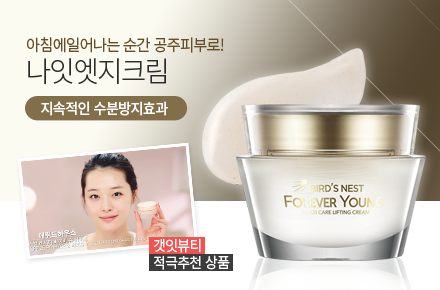
<style>
.page{position:relative;width:440px;height:290px}
.page>*{position:absolute;margin:0}
.t1{font:16.2px "NotoSansCJKkr-DemiLight";letter-spacing:-0.05em;color:#694f27;scale:0.95 1}
.t2{font:28.8px "NotoSansCJKkr-Light";letter-spacing:-0.05em;color:#2c2c2c;scale:0.95 1}
.t3{font:15px "NotoSansCJKkr-Medium";letter-spacing:-0.05em;color:#ffffff;scale:0.95 1}
.t4{font:14.7px "NotoSansCJKkr-Regular";letter-spacing:-0.05em;color:#ffffff;scale:0.95 1}
</style>
<div class="page">
<p class="t1" style="left:27px;top:37px;width:197px;height:16px">아침에일어나는 순간 공주피부로!</p>
<p class="t2" style="left:28px;top:58px;width:138px;height:27px">나잇엣지크림</p>
<p class="t3" style="left:41px;top:101px;width:127px;height:15px">지속적인 수분방지효과</p>
<p class="t4" style="left:153px;top:238px;width:77px;height:32px">갯잇뷰티<br>적극추천 상품</p>
</div>
